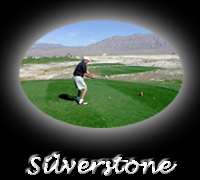
<style>
.page{position:relative;width:200px;height:180px}
.page>*{position:absolute;margin:0}
.t1{font:21.4px "LucidaHandwriting-Italic";font-weight:bold}
</style>
<div class="page">
<p class="t1" style="left:28px;top:154px;width:149px;height:22px">Silverstone</p>
</div>
